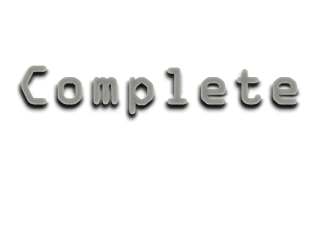
<style>
.page{position:relative;width:320px;height:240px;background:#ffffff}
.page>*{position:absolute;margin:0}
.t1{font:48px "OCRAStd";color:#858585;font-weight:bold}
</style>
<div class="page">
<p class="t1" style="left:21px;top:65px;width:276px;height:50px">Complete</p>
</div>
